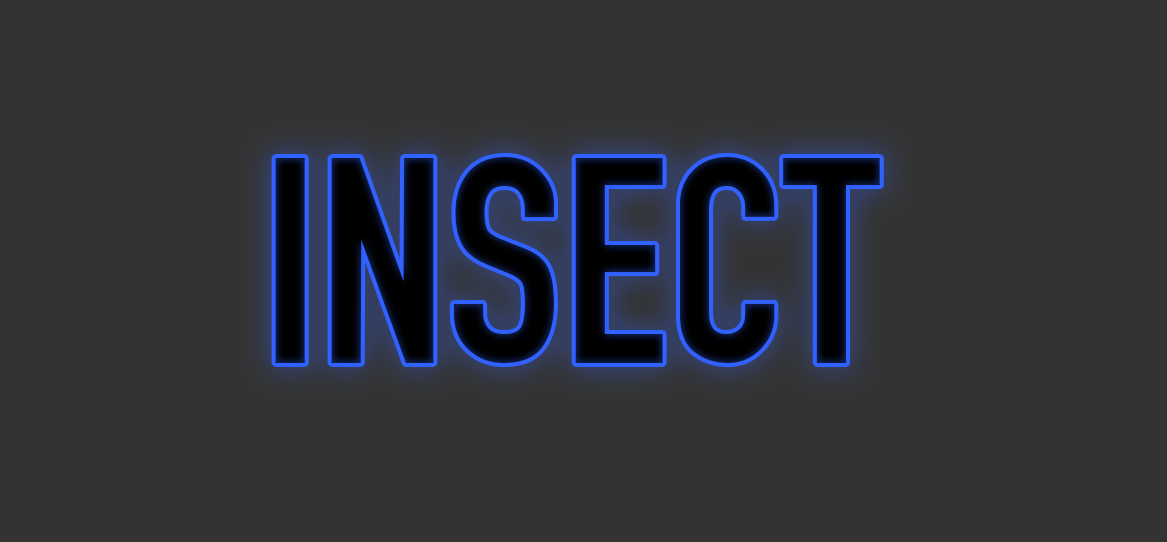
<style>
.page{position:relative;width:1167px;height:542px;background:#333333}
.page>*{position:absolute;margin:0}
.t1{font:285.8px "DINEngschrift";color:#010205}
</style>
<div class="page">
<p class="t1" style="left:275px;top:157px;width:605px;height:206px">INSECT</p>
</div>
